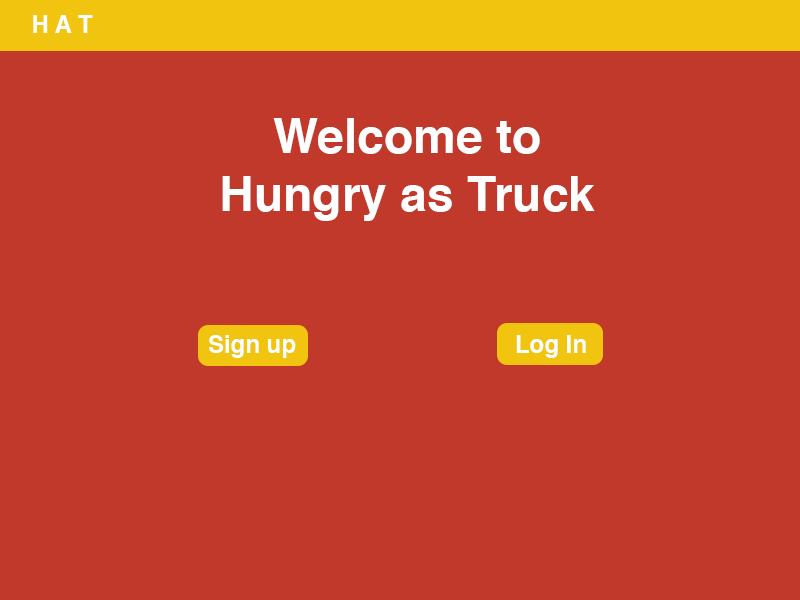
<style>
.page{position:relative;width:800px;height:600px;background:#c0392b}
.page>*{position:absolute;margin:0}
.t1{font:24px "Helvetica-Bold";color:#ffffff}
.t2{font:48px "Helvetica-Bold";color:#ffffff}
</style>
<div class="page">
<p class="t1" style="left:33px;top:15px;width:60px;height:18px">H A T</p>
<p class="t2" style="left:222px;top:118px;width:373px;height:103px;text-align:center">Welcome to<br>Hungry as Truck</p>
<p class="t1" style="left:209px;top:335px;width:87px;height:23px">Sign up</p>
<p class="t1" style="left:516px;top:335px;width:70px;height:23px">Log In</p>
</div>
